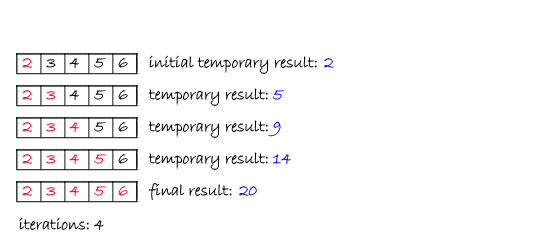
<style>
.page{position:relative;width:550px;height:250px;background:#ffffff}
.page>*{position:absolute;margin:0}
.t1{font:16.7px "BradleyHandITC";color:#ff0018}
.t2{font:16.7px "BradleyHandITC";color:#000000}
.t3{font:16.7px "BradleyHandITC";color:#1200ff}
.t4{font:16.7px "BradleyHandITC"}
</style>
<div class="page">
<p class="t1" style="left:22px;top:58px;width:10px;height:10px">2</p>
<p class="t2" style="left:46px;top:59px;width:10px;height:9px">3</p>
<p class="t2" style="left:69px;top:58px;width:10px;height:11px">4</p>
<p class="t2" style="left:94px;top:58px;width:12px;height:10px">5</p>
<p class="t2" style="left:118px;top:58px;width:10px;height:10px">6</p>
<p class="t2" style="left:149px;top:55px;width:168px;height:19px">initial temporary result:</p>
<p class="t3" style="left:324px;top:58px;width:10px;height:10px">2</p>
<p class="t2" style="left:148px;top:88px;width:120px;height:18px">temporary result:</p>
<p class="t1" style="left:22px;top:90px;width:10px;height:10px">2</p>
<p class="t1" style="left:46px;top:91px;width:10px;height:9px">3</p>
<p class="t2" style="left:69px;top:90px;width:10px;height:11px">4</p>
<p class="t2" style="left:94px;top:90px;width:12px;height:10px">5</p>
<p class="t2" style="left:118px;top:90px;width:10px;height:10px">6</p>
<p class="t3" style="left:272px;top:90px;width:12px;height:10px">5</p>
<p class="t1" style="left:22px;top:122px;width:10px;height:10px">2</p>
<p class="t1" style="left:46px;top:123px;width:10px;height:9px">3</p>
<p class="t1" style="left:69px;top:122px;width:10px;height:11px">4</p>
<p class="t2" style="left:94px;top:122px;width:12px;height:10px">5</p>
<p class="t2" style="left:118px;top:122px;width:10px;height:10px">6</p>
<p class="t2" style="left:148px;top:120px;width:120px;height:18px">temporary result:</p>
<p class="t3" style="left:268px;top:121px;width:13px;height:16px">9</p>
<p class="t1" style="left:22px;top:154px;width:10px;height:10px">2</p>
<p class="t1" style="left:46px;top:155px;width:10px;height:9px">3</p>
<p class="t1" style="left:69px;top:154px;width:10px;height:11px">4</p>
<p class="t1" style="left:94px;top:154px;width:12px;height:10px">5</p>
<p class="t2" style="left:118px;top:154px;width:10px;height:10px">6</p>
<p class="t2" style="left:148px;top:152px;width:120px;height:18px">temporary result:</p>
<p class="t3" style="left:272px;top:154px;width:19px;height:11px">14</p>
<p class="t2" style="left:148px;top:183px;width:84px;height:17px">final result:</p>
<p class="t1" style="left:22px;top:186px;width:10px;height:10px">2</p>
<p class="t1" style="left:46px;top:187px;width:10px;height:9px">3</p>
<p class="t1" style="left:69px;top:186px;width:10px;height:11px">4</p>
<p class="t1" style="left:94px;top:186px;width:12px;height:10px">5</p>
<p class="t4" style="left:118px;top:186px;width:10px;height:10px">6</p>
<p class="t3" style="left:239px;top:186px;width:18px;height:10px">20</p>
<p class="t2" style="left:19px;top:217px;width:85px;height:14px">iterations: 4</p>
</div>
